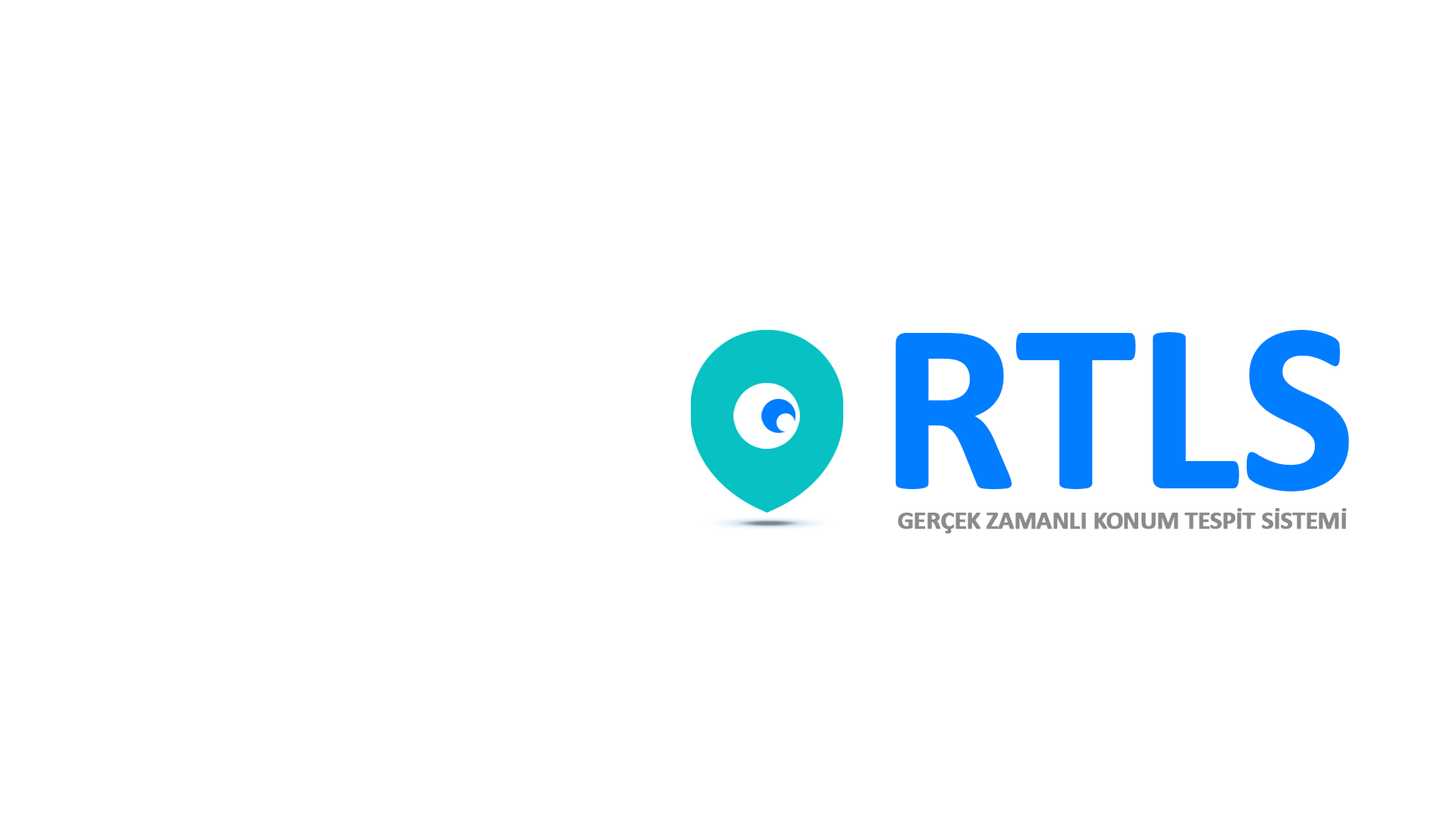
<style>
.page{position:relative;width:1456px;height:819px;background:#ffffff}
.page>*{position:absolute;margin:0}
.t1{font:243.9px "Calibri-Bold";letter-spacing:-0.025em;color:#007eff;font-weight:bold}
.t2{font:25.6px "Calibri-Bold";letter-spacing:-0.025em;color:#8b8b8b;font-weight:bold}
</style>
<div class="page">
<p class="t1" style="left:896px;top:330px;width:453px;height:161px">RTLS</p>
<p class="t2" style="left:898px;top:508px;width:449px;height:26px">GERÇEK ZAMANLI KONUM TESPİT SİSTEMİ</p>
</div>
